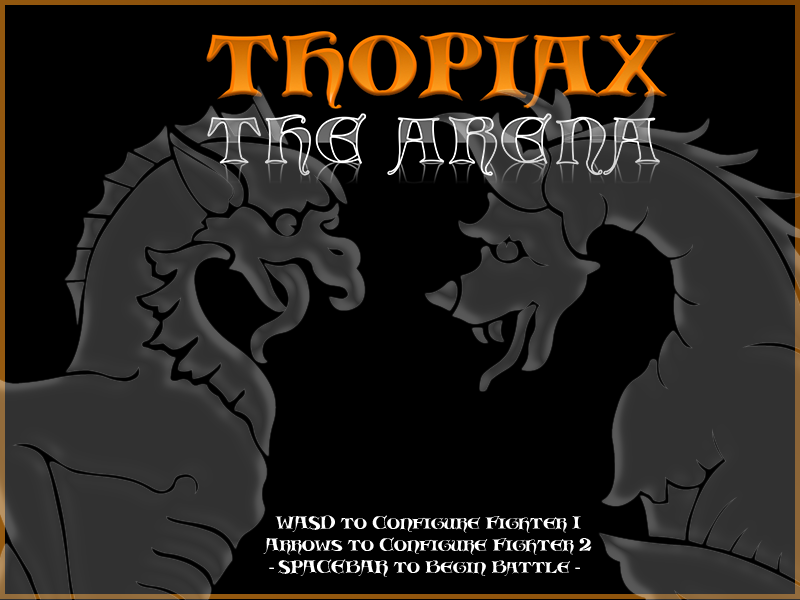
<style>
.page{position:relative;width:800px;height:600px;background:#000000}
.page>*{position:absolute;margin:0}
.t1{font:18.2px "Scribish";color:#ffffff}
.t2{font:18.2px "MyriadPro-Regular";color:#ffffff}
</style>
<div class="page">
<p class="t1" style="left:263px;top:515px;width:329px;height:62px;text-align:center">WASD to Configure Fighter 1<br>Arrows to Configure Fighter 2<br> <span class="t2">- </span>SPACEBAR to Begin Battle <span class="t2">- </span>!</p>
</div>
